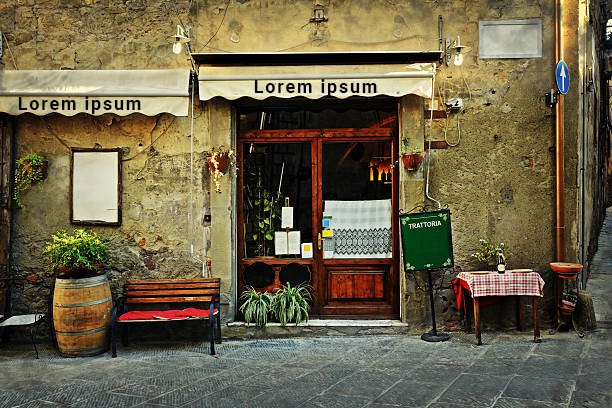
<style>
.page{position:relative;width:612px;height:408px}
.page>*{position:absolute;margin:0}
.t1{font:18px "Roboto-Bold";letter-spacing:0.1em;color:#030303}
</style>
<div class="page">
<p class="t1" style="left:254px;top:79px;width:123px;height:18px">Lorem ipsum</p>
<p class="t1" style="left:18px;top:96px;width:123px;height:18px">Lorem ipsum</p>
</div>
